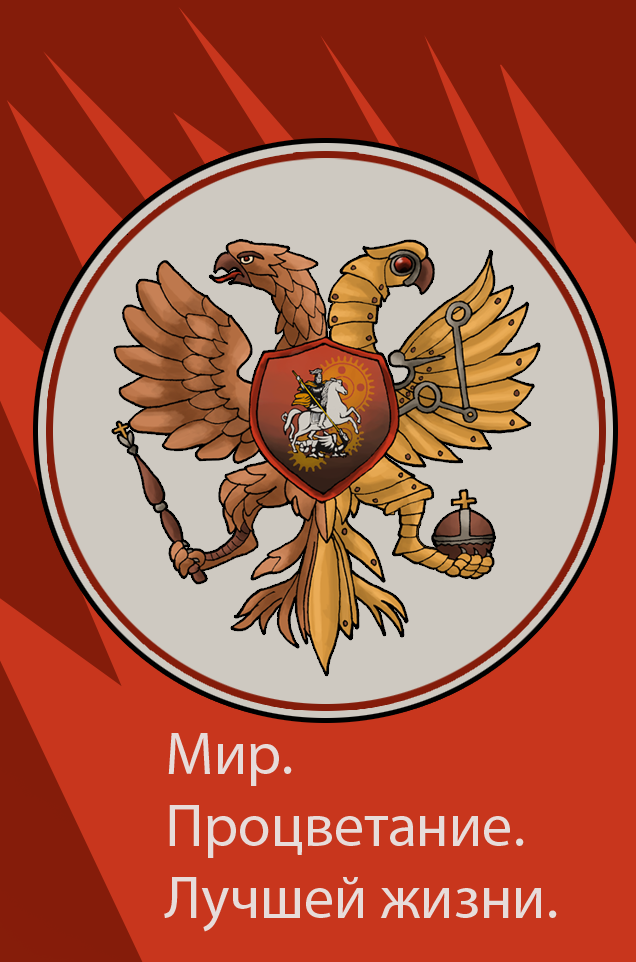
<style>
.page{position:relative;width:636px;height:962px;background:#c8361d}
.page>*{position:absolute;margin:0}
.t1{font:60px "MyriadPro-Regular";color:#e7dcda}
</style>
<div class="page">
<p class="t1" style="left:164px;top:733px;width:393px;height:199px">Мир. <br>Процветание. <br>Лучшей жизни.</p>
</div>
